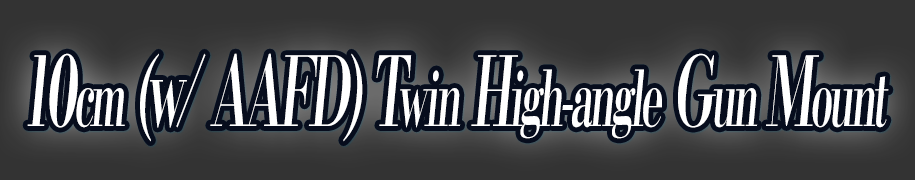
<style>
.page{position:relative;width:915px;height:180px;background:#333333}
.page>*{position:absolute;margin:0}
.t1{font:96px "KochoStd-Heavy";letter-spacing:-0.08em;color:#ffffff;font-style:italic;scale:0.53 1}
.t2{font:76.8px "KochoStd-Heavy";letter-spacing:-0.08em;color:#ffffff;font-style:italic;scale:0.53 1}
</style>
<div class="page">
<p class="t1" style="left:27px;top:53px;width:862px;height:89px">10<span class="t2">cm</span> (w/ AAFD) T<span class="t2">win</span> H<span class="t2">igh-angle</span> G<span class="t2">un </span>M<span class="t2">ount</span></p>
</div>
